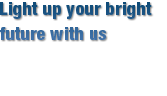
<style>
.page{position:relative;width:167px;height:96px;background:#ffffff}
.page>*{position:absolute;margin:0}
.t1{font:18px/25px "HelveticaNeueLTPro-HvCn";letter-spacing:0.01em}
.t2{font:18px/25px "HelveticaNeueLTStd-HvCn";letter-spacing:0.01em}
</style>
<div class="page">
<p class="t1" style="left:0px;top:2px;width:152px;height:38px">Light up your bright<br><span class="t2">future with us</span></p>
</div>
